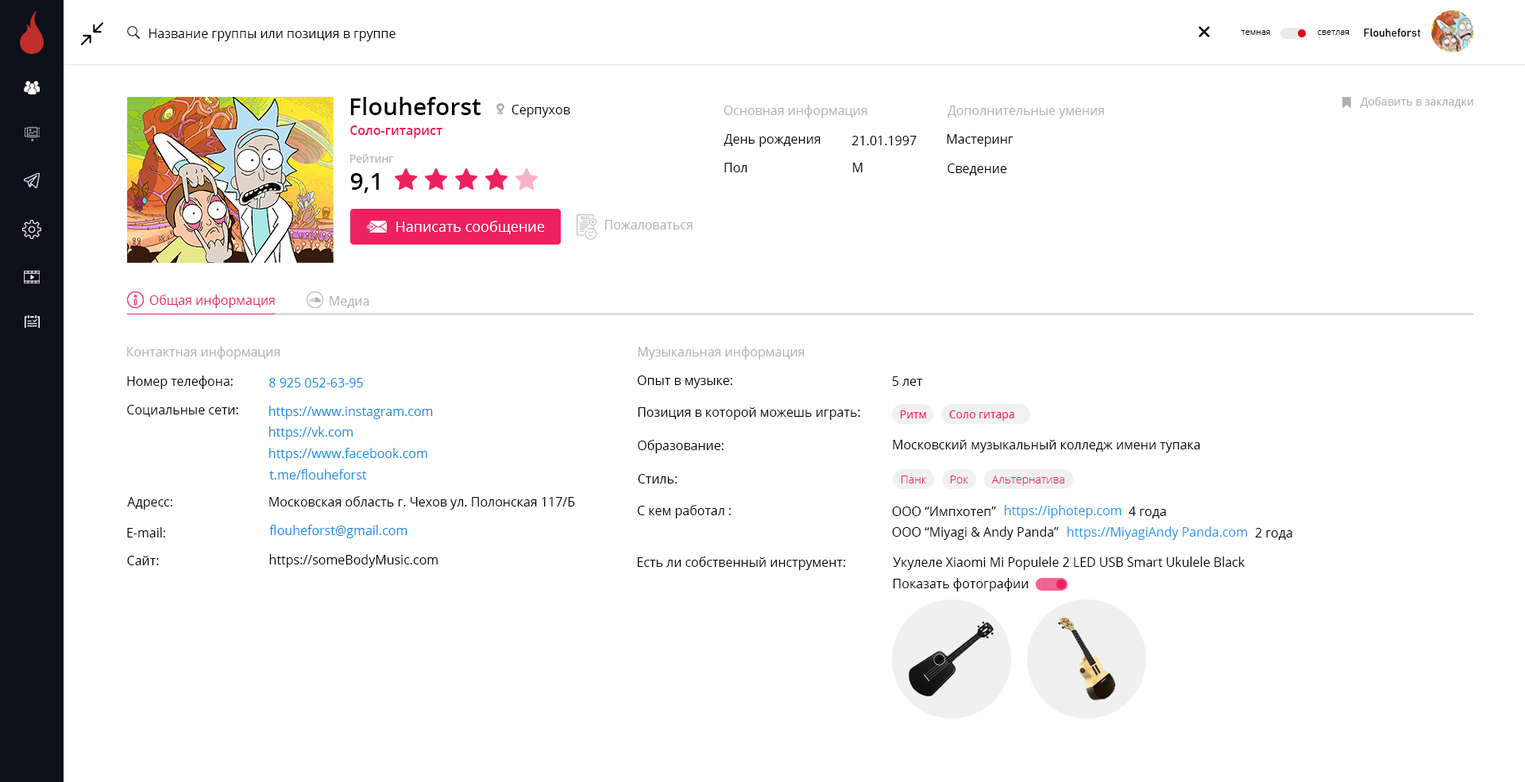
<style>
.page{position:relative;width:1525px;height:782px;background:#ffffff}
.page>*{position:absolute;margin:0}
.t1{font:12.7px "OpenSans";color:#000000}
.t2{font:11.1px "Bahnschrift";color:#000000}
.t3{font:8.7px "OpenSans-Light";color:#000000}
.t4{font:23.8px "OpenSans-Semibold";color:#000000}
.t5{font:11.1px "OpenSans";color:#afafb7}
.t6{font:12.7px "aakar-medium";color:#000000}
.t7{font:12.7px "aakar-medium";color:#afafb7}
.t8{font:12.7px "OpenSans-Semibold";color:#ed215e}
.t9{font:14.3px "aakar-medium";color:#ffffff}
.t10{font:12.7px "aakar-medium";color:#ed215e}
.t11{font:12.7px "aakar-medium";color:#0d8aed}
.t12{font:11.1px "aakar-medium";color:#ed215e}
.t13{font:11.1px "OpenSans-Light";color:#ed215e}
.t14{font:12.7px "aakar-medium";color:#2196f3}
</style>
<div class="page">
<p class="t1" style="left:149px;top:29px;width:246px;height:12px">Название группы или позиция в группе</p>
<p class="t2" style="left:1363px;top:28px;width:58px;height:9px">Flouheforst</p>
<p class="t3" style="left:1240px;top:30px;width:30px;height:5px">темная</p>
<p class="t3" style="left:1317px;top:30px;width:31px;height:5px">светлая</p>
<p class="t4" style="left:350px;top:97px;width:130px;height:18px">Flouheforst</p>
<p class="t5" style="left:1359px;top:97px;width:114px;height:11px">Добавить в закладки</p>
<p class="t6" style="left:511px;top:105px;width:59px;height:13px">Серпухов</p>
<p class="t7" style="left:723px;top:105px;width:144px;height:13px">Основная информация</p>
<p class="t7" style="left:947px;top:106px;width:157px;height:12px">Дополнительные умения</p>
<p class="t8" style="left:350px;top:125px;width:92px;height:13px">Соло-гитарист</p>
<p class="t6" style="left:723px;top:134px;width:97px;height:13px">День рождения</p>
<p class="t6" style="left:851px;top:136px;width:65px;height:9px">21.01.1997</p>
<p class="t6" style="left:947px;top:134px;width:66px;height:13px">Мастеринг</p>
<p class="t5" style="left:350px;top:154px;width:44px;height:9px">Рейтинг</p>
<p class="t4" style="left:350px;top:173px;width:29px;height:20px">9,1</p>
<p class="t6" style="left:724px;top:163px;width:23px;height:9px">Пол</p>
<p class="t6" style="left:853px;top:163px;width:9px;height:9px">М</p>
<p class="t6" style="left:947px;top:164px;width:60px;height:11px">Сведение</p>
<p class="t9" style="left:396px;top:221px;width:149px;height:13px">Написать сообщение</p>
<p class="t7" style="left:604px;top:220px;width:88px;height:9px">Пожаловаться</p>
<p class="t10" style="left:149px;top:295px;width:126px;height:13px">Общая информация</p>
<p class="t7" style="left:330px;top:296px;width:39px;height:12px">Медиа</p>
<p class="t7" style="left:127px;top:346px;width:153px;height:14px">Контактная информация</p>
<p class="t7" style="left:638px;top:346px;width:166px;height:14px">Музыкальная информация</p>
<p class="t6" style="left:127px;top:376px;width:106px;height:13px">Номер телефона:</p>
<p class="t11" style="left:269px;top:378px;width:94px;height:9px">8 925 052-63-95</p>
<p class="t6" style="left:637px;top:376px;width:95px;height:12px">Опыт в музыке:</p>
<p class="t6" style="left:892px;top:376px;width:31px;height:10px">5 лет</p>
<p class="t6" style="left:127px;top:405px;width:111px;height:12px">Социальные сети:</p>
<p class="t11" style="left:269px;top:406px;width:164px;height:13px">https://www.instagram.com</p>
<p class="t6" style="left:638px;top:407px;width:222px;height:13px">Позиция в которой можешь играть:</p>
<p class="t12" style="left:900px;top:411px;width:26px;height:7px">Ритм</p>
<p class="t12" style="left:949px;top:411px;width:65px;height:10px">Cоло гитара</p>
<p class="t11" style="left:269px;top:426px;width:84px;height:14px">https://vk.com</p>
<p class="t11" style="left:269px;top:448px;width:158px;height:13px">https://www.facebook.com</p>
<p class="t6" style="left:638px;top:440px;width:85px;height:13px">Образование:</p>
<p class="t6" style="left:893px;top:440px;width:307px;height:13px">Московский музыкальный колледж имени тупака</p>
<p class="t11" style="left:269px;top:469px;width:98px;height:11px">t.me/flouheforst</p>
<p class="t6" style="left:638px;top:474px;width:39px;height:10px">Стиль:</p>
<p class="t13" style="left:901px;top:476px;width:26px;height:8px">Панк</p>
<p class="t13" style="left:950px;top:476px;width:18px;height:8px">Рок</p>
<p class="t13" style="left:991px;top:476px;width:73px;height:10px">Альтернатива</p>
<p class="t6" style="left:127px;top:497px;width:45px;height:13px">Адресс:</p>
<p class="t6" style="left:269px;top:496px;width:306px;height:14px">Московская область г. Чехов ул. Полонская 117/Б</p>
<p class="t6" style="left:637px;top:505px;width:94px;height:14px">С кем работал :</p>
<p class="t6" style="left:892px;top:507px;width:104px;height:9px">ООО “Импхотеп”</p>
<p class="t14" style="left:1004px;top:505px;width:117px;height:14px">https://iphotep.com</p>
<p class="t6" style="left:1128px;top:507px;width:38px;height:12px">4 года</p>
<p class="t6" style="left:127px;top:527px;width:38px;height:11px">E-mail:</p>
<p class="t11" style="left:269px;top:525px;width:138px;height:13px">flouheforst@gmail.com</p>
<p class="t6" style="left:892px;top:526px;width:166px;height:14px">ООО “Miyagi &amp; Andy Panda”</p>
<p class="t14" style="left:1067px;top:526px;width:180px;height:14px">https://MiyagiAndy Panda.com</p>
<p class="t6" style="left:1255px;top:528px;width:37px;height:12px">2 года</p>
<p class="t6" style="left:127px;top:556px;width:32px;height:9px">Сайт:</p>
<p class="t6" style="left:269px;top:554px;width:169px;height:14px">https://someBodyMusic.com</p>
<p class="t6" style="left:637px;top:557px;width:208px;height:13px">Есть ли собственный инструмент:</p>
<p class="t6" style="left:893px;top:557px;width:351px;height:13px">Укулеле Xiaomi Mi Populele 2 LED USB Smart Ukulele Black</p>
<p class="t6" style="left:893px;top:578px;width:135px;height:14px">Показать фотографии</p>
</div>
